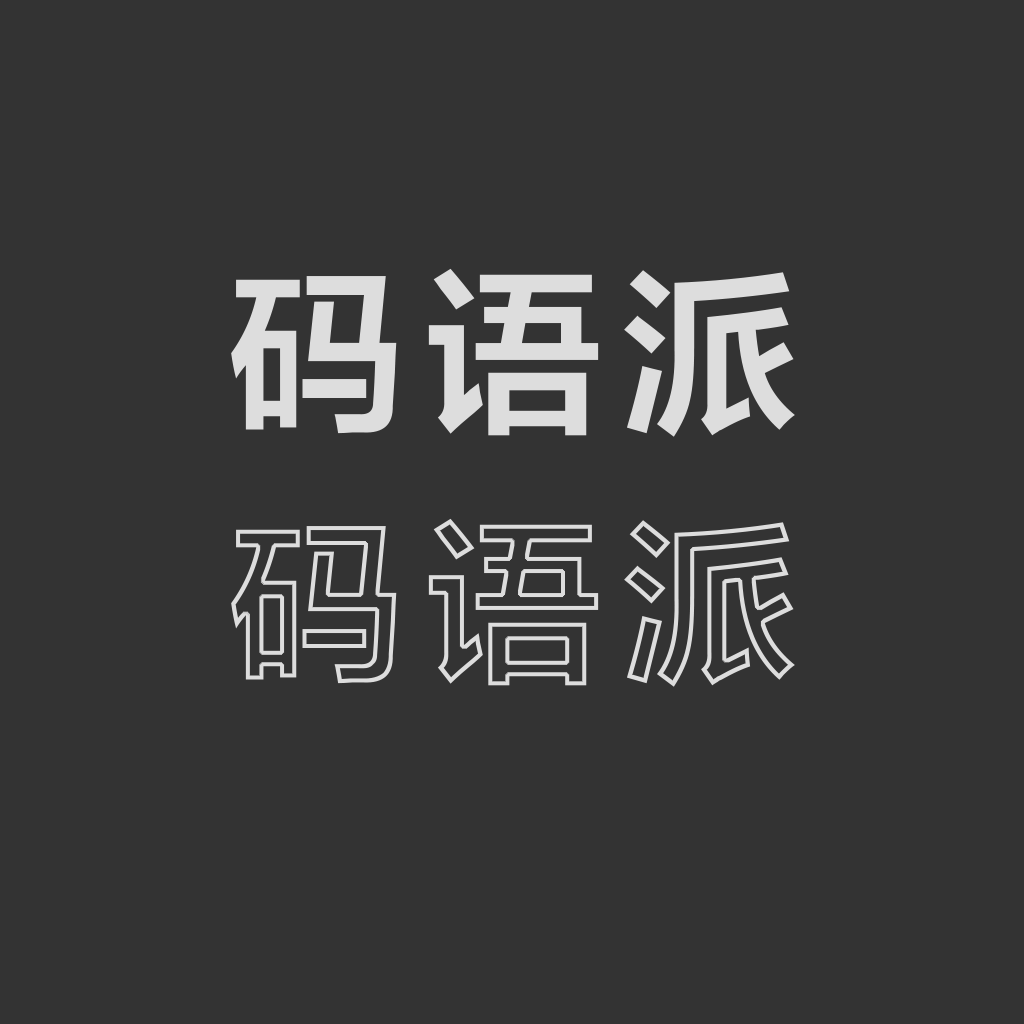
<style>
.page{position:relative;width:1024px;height:1024px;background:#333333}
.page>*{position:absolute;margin:0}
.t1{font:179px "FZLTZCHJW--GB1-0";letter-spacing:0.1em;color:#dddddd}
</style>
<div class="page">
<p class="t1" style="left:231px;top:268px;width:564px;height:169px">码语派</p>
</div>
